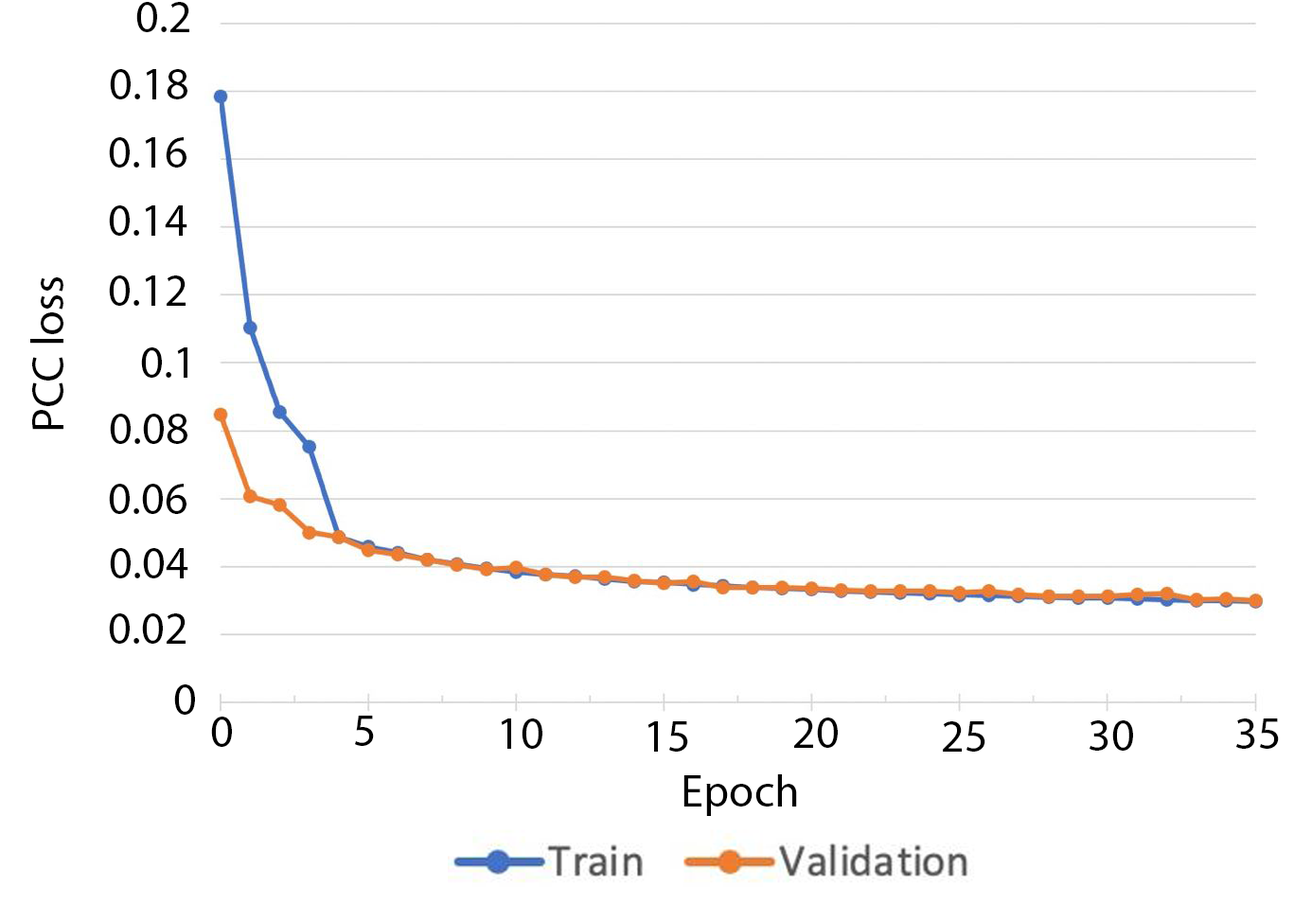
<style>
.page{position:relative;width:1294px;height:922px;background:#ffffff}
.page>*{position:absolute;margin:0}
.t1{font:45.4px "MyriadPro-Regular";color:#000000}
</style>
<div class="page">
<p class="t1" style="left:136px;top:2px;width:53px;height:30px">0.2</p>
<p class="t1" style="left:110px;top:69px;width:77px;height:30px">0.18</p>
<p class="t1" style="left:109px;top:137px;width:77px;height:31px">0.16</p>
<p class="t1" style="left:109px;top:205px;width:78px;height:31px">0.14</p>
<p class="t1" style="left:30px;top:277px;width:33px;height:153px;rotate:-90deg">PCC loss</p>
<p class="t1" style="left:109px;top:275px;width:76px;height:31px">0.12</p>
<p class="t1" style="left:141px;top:347px;width:46px;height:31px">0.1</p>
<p class="t1" style="left:110px;top:414px;width:77px;height:30px">0.08<br>.0</p>
<p class="t1" style="left:109px;top:484px;width:77px;height:30px">0.06<br>.06</p>
<p class="t1" style="left:110px;top:548px;width:78px;height:30px">0.04<br>.04</p>
<p class="t1" style="left:109px;top:613px;width:76px;height:31px">0.02<br>.02</p>
<p class="t1" style="left:174px;top:684px;width:21px;height:30px">0</p>
<p class="t1" style="left:211px;top:716px;width:21px;height:31px">0</p>
<p class="t1" style="left:355px;top:715px;width:19px;height:31px">5</p>
<p class="t1" style="left:501px;top:718px;width:41px;height:31px">10</p>
<p class="t1" style="left:647px;top:721px;width:41px;height:30px">15</p>
<p class="t1" style="left:794px;top:717px;width:44px;height:31px">20</p>
<p class="t1" style="left:943px;top:721px;width:42px;height:30px">25</p>
<p class="t1" style="left:1089px;top:720px;width:44px;height:30px">30</p>
<p class="t1" style="left:1236px;top:718px;width:43px;height:31px">35</p>
<p class="t1" style="left:683px;top:773px;width:114px;height:43px">Epoch</p>
</div>
